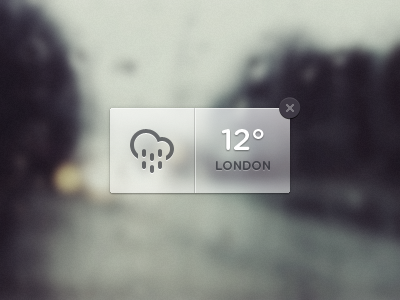
<style>
.page{position:relative;width:400px;height:300px}
.page>*{position:absolute;margin:0}
.t1{font:30px "GothamRounded-Medium";color:#ffffff}
.t2{font:30px "GothamRounded-Bold";color:#ffffff}
.t3{font:12px "GothamRounded-Medium";color:#46484e}
</style>
<div class="page">
<p class="t1" style="left:221px;top:129px;width:43px;height:21px">12<span class="t2">°</span></p>
<p class="t3" style="left:216px;top:161px;width:54px;height:9px">LONDON</p>
</div>
